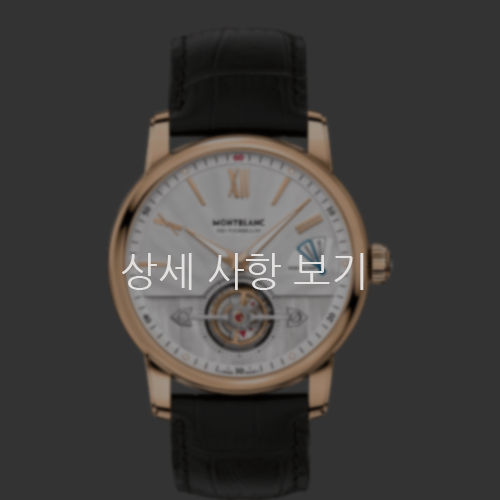
<style>
.page{position:relative;width:500px;height:500px;background:#333333}
.page>*{position:absolute;margin:0}
.t1{font:40px "NanumGothic";color:#e2e1e0}
</style>
<div class="page">
<p class="t1" style="left:122px;top:253px;width:242px;height:37px">상세 사항 보기</p>
</div>
